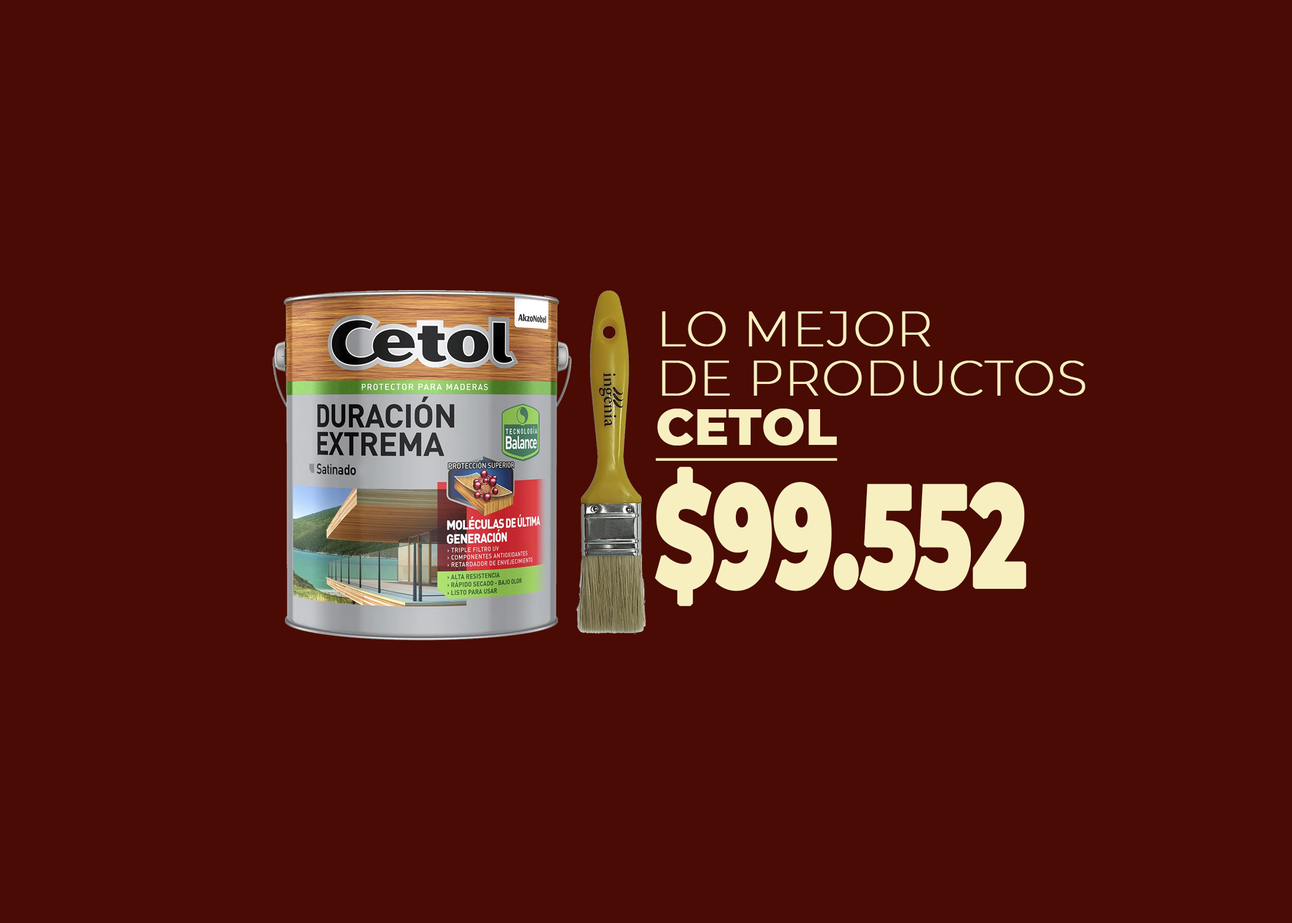
<style>
.page{position:relative;width:1292px;height:923px;background:#490b03}
.page>*{position:absolute;margin:0}
.t1{font:50.1px/49.3px "Montserrat-ExtraLight";color:#f8efc0;font-weight:bold}
.t2{font:50.1px/49.3px "Montserrat-ExtraBold";color:#f8efc0;font-weight:bold;text-decoration:underline}
.t3{font:142.9px "Montserrat-ExtraBold";color:#f8efc0;font-weight:bold;scale:0.62 1}
</style>
<div class="page">
<p class="t1" style="left:655px;top:311px;width:430px;height:150px">LO MEJOR<br>DE PRODUCTOS<br><span class="t2">CETOL</span></p>
<p class="t3" style="left:655px;top:466px;width:371px;height:140px">$99.552</p>
</div>
